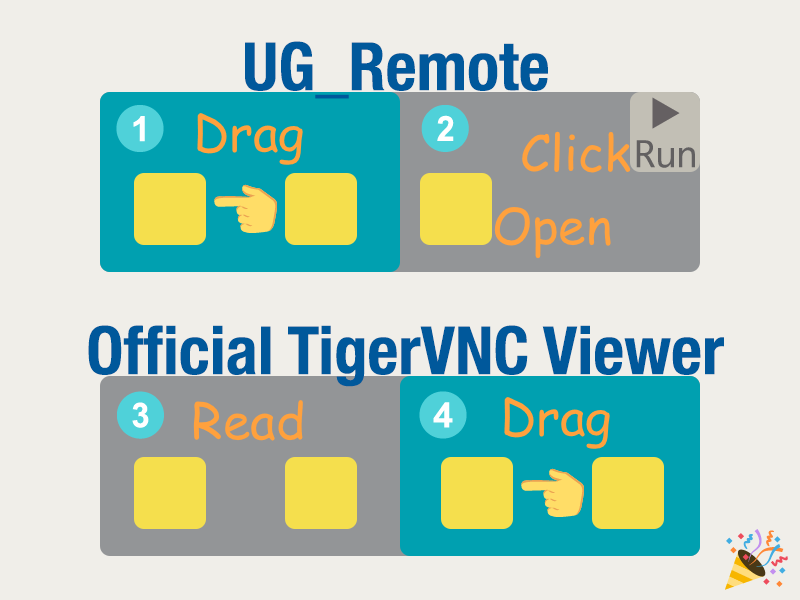
<style>
.page{position:relative;width:800px;height:600px;background:#f0eee9}
.page>*{position:absolute;margin:0}
.t1{font:66.7px "HelveticaNeue-CondensedBold";color:#00589b}
.t2{font:50px "ComicSansMS";color:#ffa13d}
</style>
<div class="page">
<p class="t1" style="left:245px;top:41px;width:303px;height:58px">UG_Remote</p>
<p class="t2" style="left:197px;top:113px;width:106px;height:52px">Drag</p>
<p class="t2" style="left:522px;top:131px;width:109px;height:42px">Click</p>
<p class="t2" style="left:494px;top:207px;width:117px;height:52px">Open</p>
<p class="t1" style="left:88px;top:325px;width:636px;height:62px">Official TigerVNC Viewer</p>
<p class="t2" style="left:193px;top:400px;width:110px;height:41px">Read</p>
<p class="t2" style="left:504px;top:397px;width:106px;height:52px">Drag</p>
</div>
